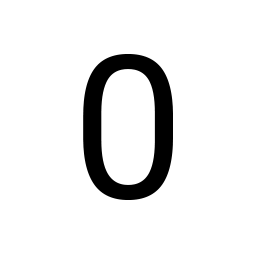
<style>
.page{position:relative;width:256px;height:256px;background:#ffffff}
.page>*{position:absolute;margin:0}
.t1{font:200px "Roboto-Regular";color:#000000}
</style>
<div class="page">
<p class="t1" style="left:83px;top:54px;width:90px;height:146px">0</p>
</div>
